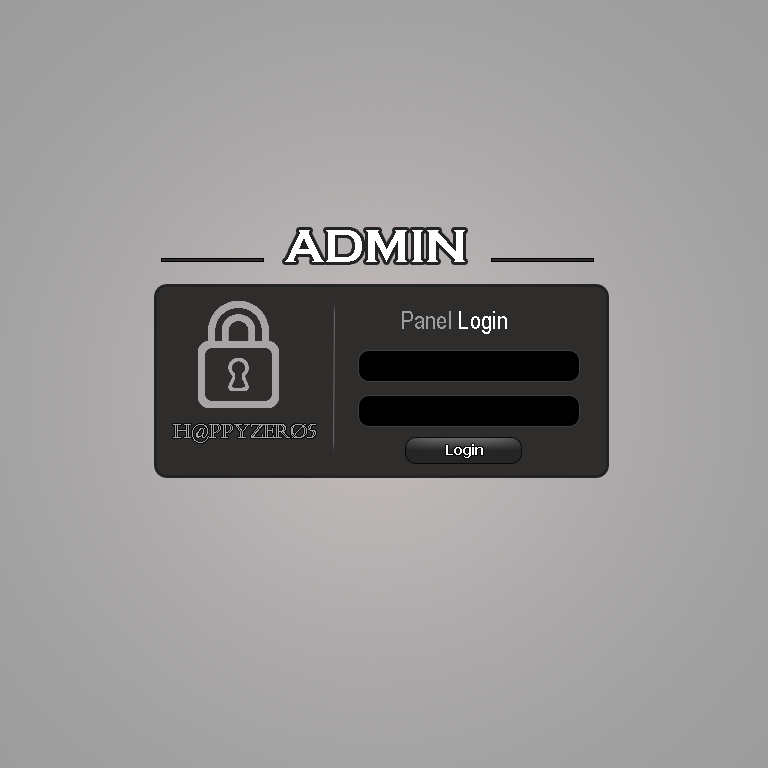
<style>
.page{position:relative;width:768px;height:768px}
.page>*{position:absolute;margin:0}
.t1{font:48px "CopperplateGothic-Bold";letter-spacing:-0.005em;color:#ffffff;text-transform:uppercase}
.t2{font:25px "ArialNarrow";color:#9d9d9d}
.t3{font:25px "ArialNarrow";color:#ffffff}
.t4{font:20px "Castellar";letter-spacing:-0.005em;color:#a6a4a4;text-transform:uppercase}
.t5{font:14px "Tahoma-Bold";color:#ffffff}
</style>
<div class="page">
<p class="t1" style="left:285px;top:230px;width:180px;height:32px">admin</p>
<p class="t2" style="left:402px;top:311px;width:105px;height:23px">Panel <span class="t3">Login</span></p>
<p class="t4" style="left:173px;top:424px;width:143px;height:19px">H@PPyZERØ5</p>
<p class="t5" style="left:446px;top:444px;width:37px;height:14px">Login</p>
</div>
